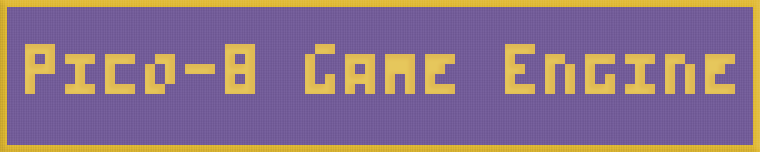
<style>
.page{position:relative;width:760px;height:152px}
.page>*{position:absolute;margin:0}
.t1{font:40px "PICO-8";color:#e6c75c}
</style>
<div class="page">
<p class="t1" style="left:25px;top:44px;width:710px;height:50px">Pico-8 Game Engine</p>
</div>
